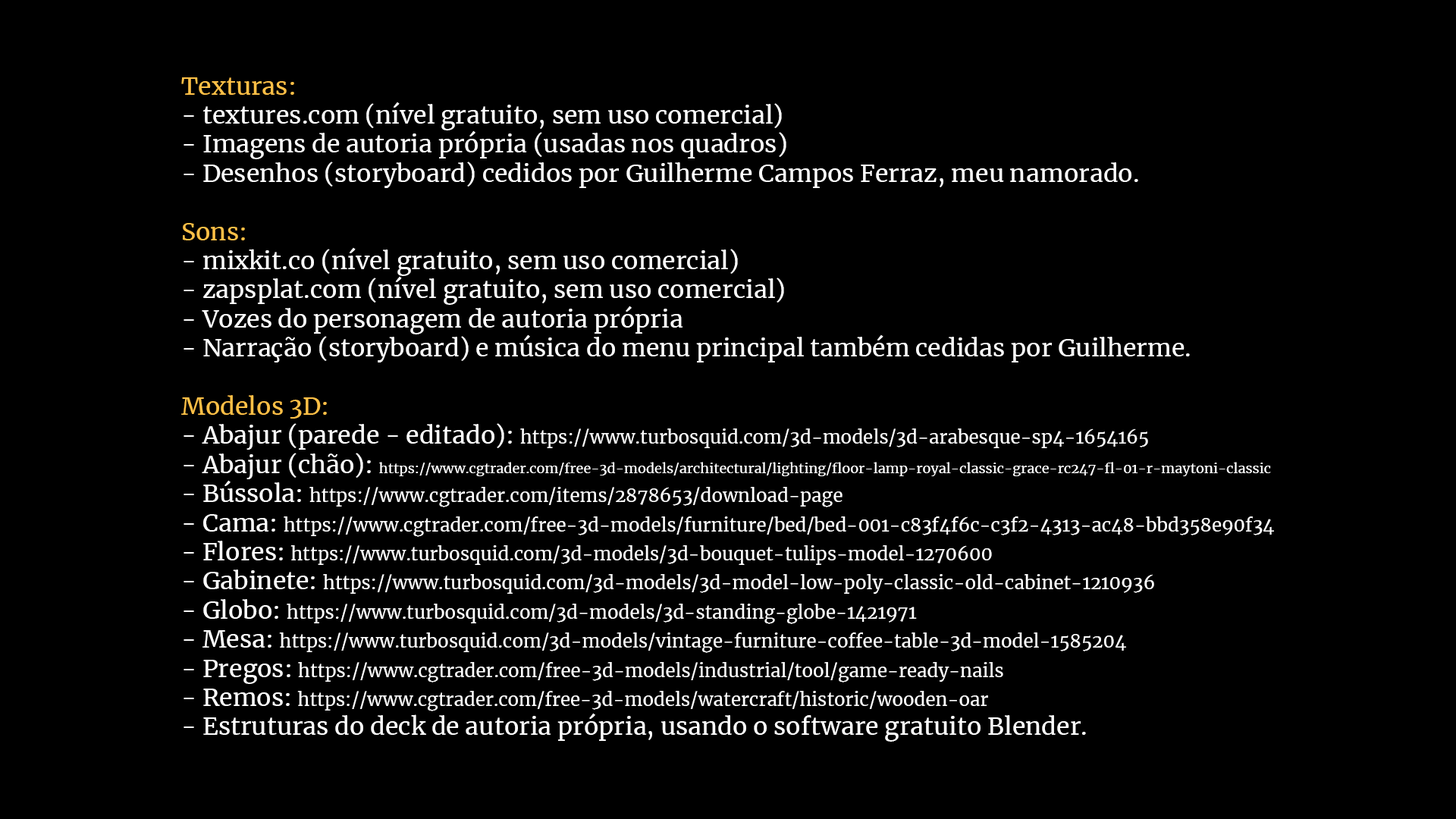
<style>
.page{position:relative;width:1456px;height:819px;background:#000000}
.page>*{position:absolute;margin:0}
.t1{font:24.3px "Merriweather-Regular";color:#ffffff}
.t2{font:24.3px "Merriweather-Regular";color:#ffc047}
.t3{font:18.2px "Merriweather-Regular";color:#ffffff}
.t4{font:13.6px "Merriweather-Regular";color:#ffffff}
</style>
<div class="page">
<p class="t1" style="left:181px;top:77px;width:1093px;height:665px"><span class="t2">Texturas:<br></span>- textures.com (nível gratuito, sem uso comercial)<br>- Imagens de autoria própria (usadas nos quadros)<br>- Desenhos (storyboard) cedidos por Guilherme Campos Ferraz, meu namorado.<br><br><span class="t2">Sons:<br></span>- mixkit.co (nível gratuito, sem uso comercial)<br>- zapsplat.com (nível gratuito, sem uso comercial)<br>- Vozes do personagem de autoria própria<br>- Narração (storyboard) e música do menu principal também cedidas por Guilherme.<br><br><span class="t2">Modelos 3D:<br></span>- Abajur (parede - editado): <span class="t3">https://www.turbosquid.com/3d-models/3d-arabesque-sp4-1654165<br></span>- Abajur (chão): <span class="t4">https://www.cgtrader.com/free-3d-models/architectural/lighting/floor-lamp-royal-classic-grace-rc247-fl-01-r-maytoni-classic<br></span>- Bússola: <span class="t3">https://www.cgtrader.com/items/2878653/download-page<br></span>- Cama: <span class="t3">https://www.cgtrader.com/free-3d-models/furniture/bed/bed-001-c83f4f6c-c3f2-4313-ac48-bbd358e90f34<br></span>- Flores: <span class="t3">https://www.turbosquid.com/3d-models/3d-bouquet-tulips-model-1270600<br></span>- Gabinete: <span class="t3">https://www.turbosquid.com/3d-models/3d-model-low-poly-classic-old-cabinet-1210936<br></span>- Globo: <span class="t3">https://www.turbosquid.com/3d-models/3d-standing-globe-1421971<br></span>- Mesa: <span class="t3">https://www.turbosquid.com/3d-models/vintage-furniture-coffee-table-3d-model-1585204<br></span>- Pregos: <span class="t3">https://www.cgtrader.com/free-3d-models/industrial/tool/game-ready-nails<br></span>- Remos: <span class="t3">https://www.cgtrader.com/free-3d-models/watercraft/historic/wooden-oar<br></span>- Estruturas do deck de autoria própria, usando o software gratuito Blender.</p>
</div>
